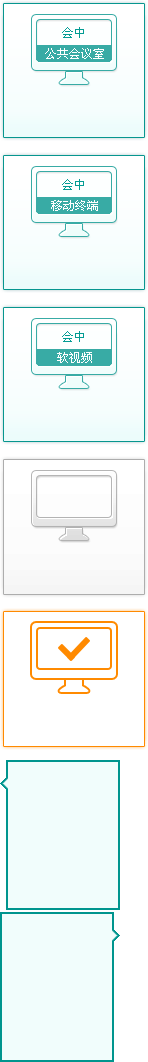
<style>
.page{position:relative;width:148px;height:1062px;background:#ffffff}
.page>*{position:absolute;margin:0}
.t1{font:12px "SimSun";color:#049c94}
.t2{font:12px "SimSun";color:#fefefe}
</style>
<div class="page">
<p class="t1" style="left:62px;top:27px;width:22px;height:11px">会中</p>
<p class="t2" style="left:45px;top:48px;width:59px;height:11px">公共会议室</p>
<p class="t1" style="left:62px;top:179px;width:22px;height:11px">会中</p>
<p class="t2" style="left:51px;top:200px;width:47px;height:11px">移动终端</p>
<p class="t1" style="left:62px;top:331px;width:22px;height:11px">会中</p>
<p class="t2" style="left:57px;top:352px;width:35px;height:11px">软视频</p>
</div>
